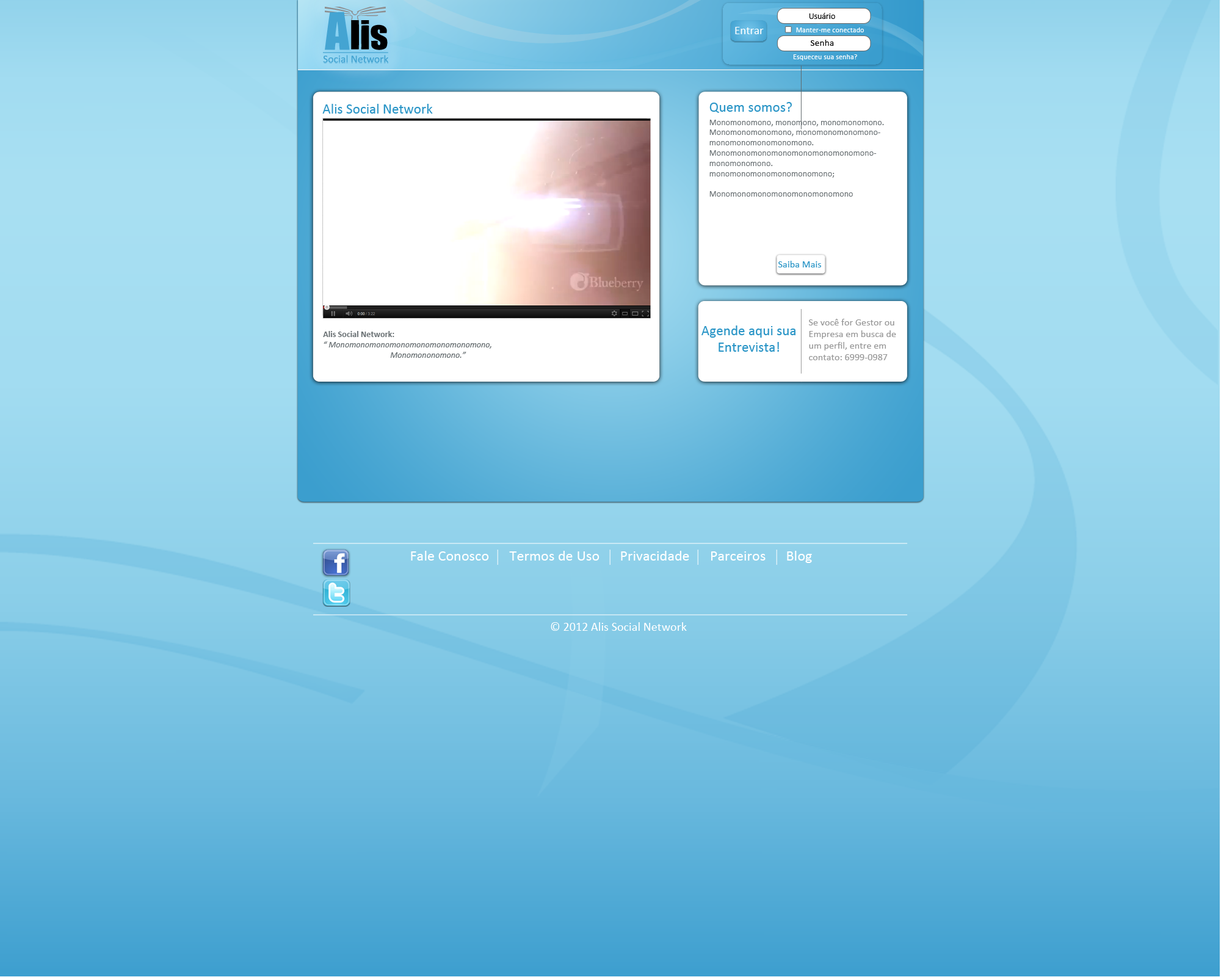
<style>
.page{position:relative;width:1221px;height:977px}
.page>*{position:absolute;margin:0}
.t1{font:8.3px "Calibri";letter-spacing:0.01em;color:#000000}
.t2{font:11.4px "Calibri";letter-spacing:0.005em;color:#ffffff}
.t3{font:7.3px "Calibri";letter-spacing:0.01em;color:#ffffff}
.t4{font:9.4px "Calibri";letter-spacing:0.01em;color:#000000}
.t5{font:14px "Calibri";letter-spacing:0.01em;color:#2c96c7}
.t6{font:14px "Calibri";letter-spacing:0.005em;color:#2c96c7}
.t7{font:8.5px "Calibri";letter-spacing:0.005em;color:#6a7174}
.t8{font:9.8px "Calibri";letter-spacing:0.005em;color:#2c96c7}
.t9{font:9.8px "Calibri";letter-spacing:0.005em;color:#999999}
.t10{font:8.5px "Calibri-Italic";letter-spacing:0.005em;color:#6a7174}
.t11{font:8.5px "Calibri-Bold";letter-spacing:0.005em;color:#6a7174}
.t12{font:14.7px "Calibri";letter-spacing:0.005em;color:#ffffff}
.t13{font:12.2px "Calibri";letter-spacing:0.005em;color:#ffffff}
</style>
<div class="page">
<p class="t1" style="left:809px;top:13px;width:26px;height:6px">Usuário</p>
<p class="t2" style="left:735px;top:27px;width:29px;height:7px">Entrar</p>
<p class="t3" style="left:796px;top:27px;width:68px;height:5px">Manter-me conectado</p>
<p class="t4" style="left:810px;top:40px;width:24px;height:6px">Senha</p>
<p class="t3" style="left:793px;top:54px;width:64px;height:6px">Esqueceu sua senha?</p>
<p class="t5" style="left:709px;top:102px;width:83px;height:11px">Quem somos?</p>
<p class="t6" style="left:322px;top:104px;width:111px;height:10px">Alis Social Network</p>
<p class="t7" style="left:709px;top:120px;width:175px;height:77px">Monomonomono, monomono, monomonomono.<br>Monomonomonomono, monomonomonomonomonomonomonomonomono.<br>Monomonomonomonomonomonomonomonomonomonomono.<br>monomonomonomonomonomono;<br><br>Monomonomonomonomonomonomono</p>
<p class="t8" style="left:778px;top:261px;width:43px;height:6px">Saiba Mais</p>
<p class="t6" style="left:701px;top:325px;width:94px;height:27px;text-align:center">Agende aqui sua <br>Entrevista!</p>
<p class="t9" style="left:808px;top:319px;width:88px;height:41px">Se você for Gestor ou Empresa em busca de um perfil, entre em contato: 6999-0987</p>
<p class="t10" style="left:323px;top:331px;width:168px;height:27px"><span class="t11">Alis Social Network:<br></span>“ Monomonomonomonomonomonomonomono,<br>                                  Monomononomono.”</p>
<p class="t12" style="left:411px;top:551px;width:401px;height:12px">Fale Conosco      Termos de Uso      Privacidade      Parceiros      Blog</p>
<p class="t13" style="left:551px;top:622px;width:136px;height:9px">© 2012 Alis Social Network</p>
</div>
